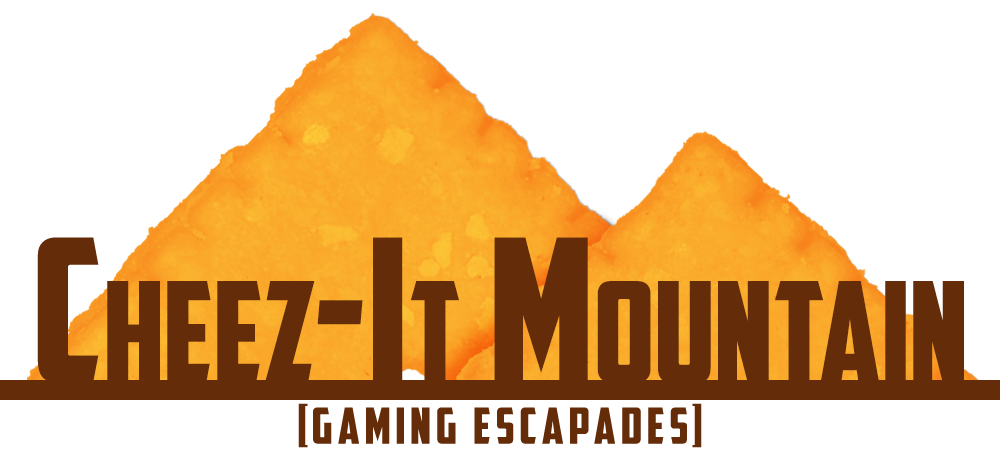
<style>
.page{position:relative;width:1000px;height:450px;background:#ffffff}
.page>*{position:absolute;margin:0}
.t1{font:200px "AmericanCaptain";letter-spacing:0.01em;color:#642c09;font-variant:small-caps}
.t2{font:50px "AmericanCaptain";letter-spacing:0.1em;color:#642c09}
</style>
<div class="page">
<p class="t1" style="left:37px;top:237px;width:927px;height:146px">Cheez-It Mountain</p>
<p class="t2" style="left:298px;top:403px;width:404px;height:45px">[gaming escapades]</p>
</div>
